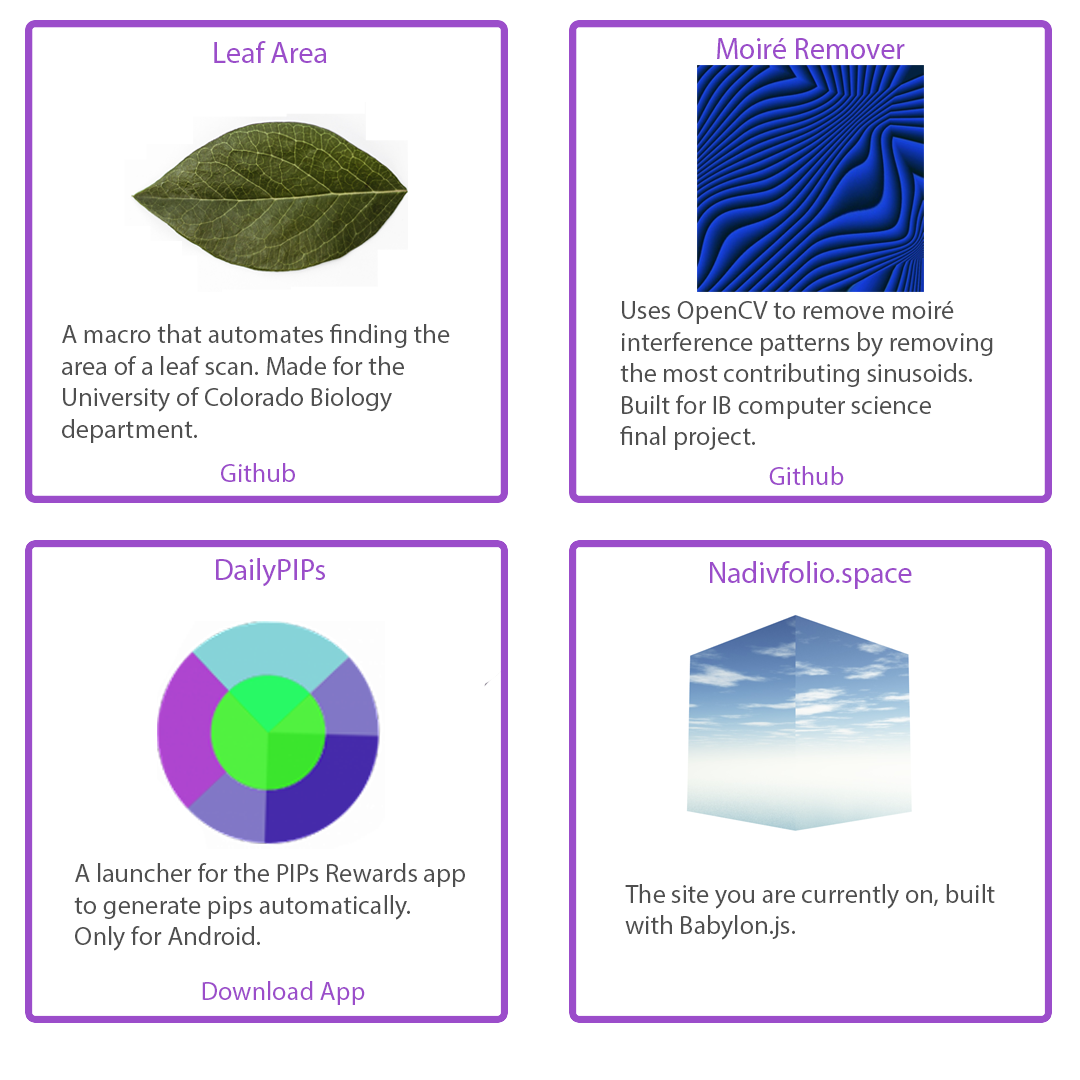
<style>
.page{position:relative;width:1080px;height:1080px;background:#ffffff}
.page>*{position:absolute;margin:0}
.t1{font:30px "MyriadPro-Regular";color:#9b4dca}
.t2{font:26.3px "MyriadPro-Regular";color:#4f4f4f}
.t3{font:26.2px "MyriadPro-Regular";color:#9b4dca}
</style>
<div class="page">
<p class="t1" style="left:214px;top:41px;width:113px;height:22px">Leaf Area</p>
<p class="t1" style="left:717px;top:38px;width:188px;height:21px">Moiré Remover</p>
<p class="t2" style="left:620px;top:301px;width:373px;height:149px">Uses OpenCV to remove moiré <br>interference patterns by removing <br>the most contributing sinusoids. <br>Built for IB computer science <br>final project.</p>
<p class="t2" style="left:62px;top:324px;width:388px;height:119px">A macro that automates finding the <br>area of a leaf scan. Made for the <br>University of Colorado Biology <br>department.</p>
<p class="t3" style="left:221px;top:463px;width:74px;height:19px">Github</p>
<p class="t3" style="left:769px;top:466px;width:75px;height:19px">Github</p>
<p class="t1" style="left:216px;top:558px;width:109px;height:29px">DailyPIPs</p>
<p class="t1" style="left:710px;top:561px;width:202px;height:28px">Nadivfolio.space</p>
<p class="t2" style="left:74px;top:863px;width:391px;height:88px">A launcher for the PIPs Rewards app<br>to generate pips automatically. <br>Only for Android.</p>
<p class="t2" style="left:625px;top:884px;width:370px;height:56px">The site you are currently on, built<br>with Babylon.js.</p>
<p class="t3" style="left:202px;top:981px;width:163px;height:24px">Download App</p>
</div>
